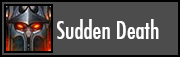
<style>
.page{position:relative;width:180px;height:57px;background:#4c4c4c}
.page>*{position:absolute;margin:0}
.t1{font:24px "FuturaCondensed";color:#ffffff}
</style>
<div class="page">
<p class="t1" style="left:57px;top:19px;width:102px;height:20px">Sudden Death</p>
</div>
